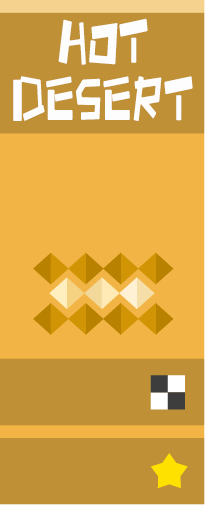
<style>
.page{position:relative;width:205px;height:505px;background:#c09037}
.page>*{position:absolute;margin:0}
.t1{font:79.7px "HappyZcool";letter-spacing:-0.02em;color:#fdfdfd;text-transform:uppercase;scale:0.67 1}
</style>
<div class="page">
<p class="t1" style="left:13px;top:18px;width:180px;height:103px;text-align:center">HOT<br>DESERT</p>
</div>
